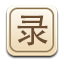
<style>
.page{position:relative;width:64px;height:64px;background:#ffffff}
.page>*{position:absolute;margin:0}
.t1{font:35px "AdobeHeitiStd-Regular";color:#6c4c30}
</style>
<div class="page">
<p class="t1" style="left:17px;top:15px;width:31px;height:31px">录</p>
</div>
